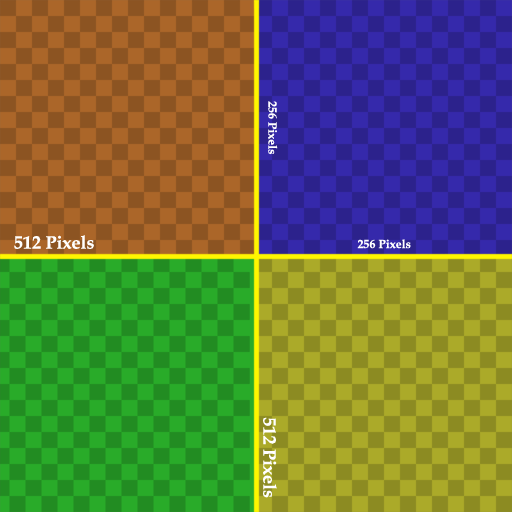
<style>
.page{position:relative;width:512px;height:512px}
.page>*{position:absolute;margin:0}
.t1{font:11.9px "BookAntiqua-Bold";color:#ffffff}
.t2{font:18px "BookAntiqua-Bold";color:#ffffff}
</style>
<div class="page">
<p class="t1" style="left:268px;top:101px;width:10px;height:54px;rotate:90deg">256 Pixels</p>
<p class="t2" style="left:14px;top:235px;width:80px;height:14px">512 Pixels</p>
<p class="t1" style="left:357px;top:239px;width:54px;height:10px">256 Pixels</p>
<p class="t2" style="left:263px;top:417px;width:14px;height:81px;rotate:90deg">512 Pixels</p>
</div>
